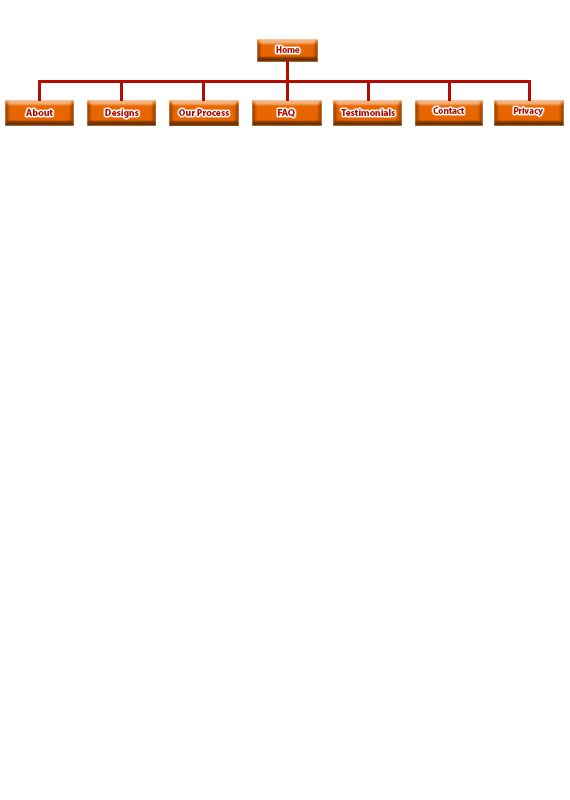
<style>
.page{position:relative;width:570px;height:800px;background:#ffffff}
.page>*{position:absolute;margin:0}
.t1{font:9px "MyriadPro-Bold";color:#b40c00}
.t2{font:9.7px "MyriadPro-Bold";color:#b40c00}
</style>
<div class="page">
<p class="t1" style="left:276px;top:46px;width:24px;height:7px">Home</p>
<p class="t2" style="left:26px;top:109px;width:27px;height:7px">About</p>
<p class="t2" style="left:105px;top:109px;width:34px;height:9px">Designs</p>
<p class="t2" style="left:179px;top:109px;width:50px;height:7px">Our Process</p>
<p class="t2" style="left:278px;top:109px;width:17px;height:8px">FAQ</p>
<p class="t2" style="left:341px;top:109px;width:54px;height:7px">Testimonials</p>
<p class="t1" style="left:433px;top:107px;width:31px;height:7px">Contact</p>
<p class="t1" style="left:514px;top:107px;width:29px;height:9px">Privacy</p>
</div>
